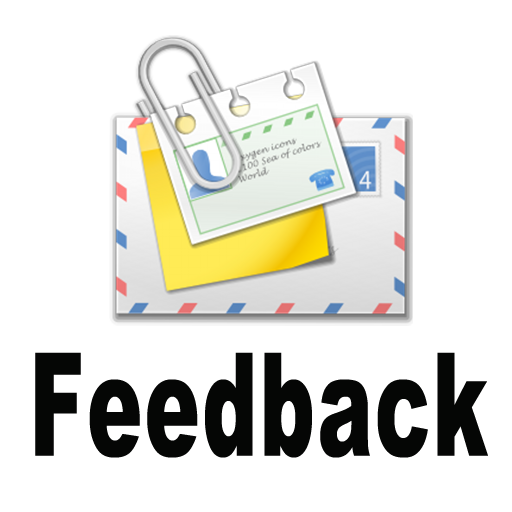
<style>
.page{position:relative;width:512px;height:512px;background:#ffffff}
.page>*{position:absolute;margin:0}
.t1{font:143.9px "Arial-Black";letter-spacing:0.025em;color:#060606;scale:0.58 1}
</style>
<div class="page">
<p class="t1" style="left:35px;top:352px;width:453px;height:106px">Feedback</p>
</div>
